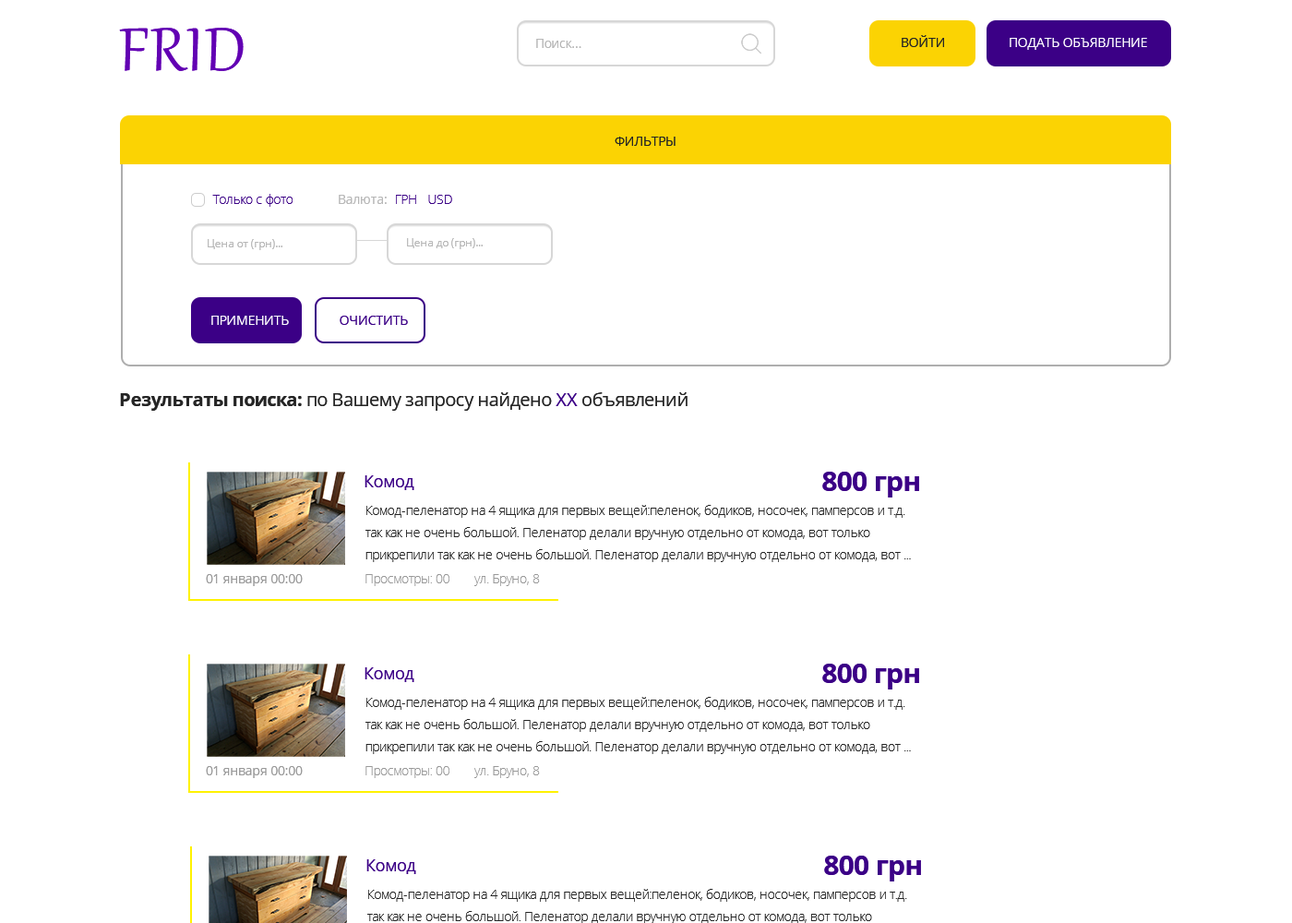
<style>
.page{position:relative;width:1292px;height:923px;background:#ffffff}
.page>*{position:absolute;margin:0}
.t1{font:75px "Gabriola";letter-spacing:0.025em;color:#6200b3}
.t2{font:12.9px "OpenSans";letter-spacing:-0.024em;color:#b7b7b7}
.t3{font:12.9px "OpenSans";letter-spacing:-0.024em;color:#252525}
.t4{font:12.9px "OpenSans";letter-spacing:-0.024em;color:#ffffff}
.t5{font:12.9px "OpenSans-Light";letter-spacing:-0.024em;color:#3b0086}
.t6{font:11.1px "OpenSans";letter-spacing:-0.024em;color:#b7b7b7}
.t7{font:12.9px "OpenSans";letter-spacing:-0.024em;color:#3b0086}
.t8{font:18.5px "OpenSans";letter-spacing:-0.024em;color:#252525}
.t9{font:18.5px "OpenSans-Bold";letter-spacing:-0.024em;color:#252525}
.t10{font:18.5px "OpenSans";letter-spacing:-0.024em;color:#3b0086}
.t11{font:27.7px "OpenSans-Bold";letter-spacing:-0.024em;color:#3b0086}
.t12{font:16.6px "OpenSans";letter-spacing:-0.024em;color:#3b0086}
.t13{font:12.9px/22.1px "OpenSans-Light";letter-spacing:-0.024em;color:#252525}
.t14{font:12.9px "OpenSans";letter-spacing:-0.024em;color:#999999}
.t15{font:12.9px "OpenSans-Light";letter-spacing:-0.024em;color:#999999}
</style>
<div class="page">
<p class="t1" style="left:119px;top:28px;width:125px;height:43px">FRID</p>
<p class="t2" style="left:536px;top:39px;width:45px;height:9px">Поиск...</p>
<p class="t3" style="left:902px;top:35px;width:42px;height:12px">ВОЙТИ</p>
<p class="t4" style="left:1010px;top:38px;width:137px;height:12px">ПОДАТЬ ОБЪЯВЛЕНИЕ</p>
<p class="t3" style="left:615px;top:137px;width:61px;height:9px">ФИЛЬТРЫ</p>
<p class="t5" style="left:212px;top:194px;width:81px;height:13px">Только с фото</p>
<p class="t2" style="left:339px;top:195px;width:48px;height:9px">Валюта:</p>
<p class="t5" style="left:396px;top:195px;width:56px;height:9px">ГРН USD</p>
<p class="t6" style="left:208px;top:239px;width:74px;height:11px">Цена от (грн)...</p>
<p class="t6" style="left:407px;top:238px;width:76px;height:11px">Цена до (грн)...</p>
<p class="t4" style="left:211px;top:316px;width:78px;height:9px">ПРИМЕНИТЬ</p>
<p class="t7" style="left:340px;top:316px;width:68px;height:9px">ОЧИСТИТЬ</p>
<p class="t8" style="left:120px;top:392px;width:568px;height:19px"><span class="t9">Результаты поиска:</span> по Вашему запросу найдено <span class="t10">ХХ </span>объявлений</p>
<p class="t11" style="left:822px;top:472px;width:97px;height:25px">800 грн</p>
<p class="t12" style="left:365px;top:475px;width:49px;height:15px">Комод</p>
<p class="t13" style="left:365px;top:505px;width:546px;height:57px">Комод-пеленатор на 4 ящика для первых вещей:пеленок, бодиков, носочек, памперсов и т.д.<br>так как не очень большой. Пеленатор делали вручную отдельно от комода, вот только<br>прикрепили так как не очень большой. Пеленатор делали вручную отдельно от комода, вот ...</p>
<p class="t14" style="left:206px;top:574px;width:97px;height:12px">01 января 00:00</p>
<p class="t15" style="left:365px;top:574px;width:84px;height:12px">Просмотры: 00</p>
<p class="t15" style="left:474px;top:574px;width:66px;height:12px">ул. Бруно, 8</p>
<p class="t11" style="left:822px;top:664px;width:97px;height:25px">800 грн</p>
<p class="t12" style="left:365px;top:667px;width:49px;height:15px">Комод</p>
<p class="t13" style="left:365px;top:697px;width:546px;height:57px">Комод-пеленатор на 4 ящика для первых вещей:пеленок, бодиков, носочек, памперсов и т.д.<br>так как не очень большой. Пеленатор делали вручную отдельно от комода, вот только<br>прикрепили так как не очень большой. Пеленатор делали вручную отдельно от комода, вот ...</p>
<p class="t14" style="left:206px;top:766px;width:97px;height:12px">01 января 00:00</p>
<p class="t15" style="left:365px;top:766px;width:84px;height:12px">Просмотры: 00</p>
<p class="t15" style="left:474px;top:766px;width:66px;height:12px">ул. Бруно, 8</p>
<p class="t11" style="left:824px;top:856px;width:97px;height:25px">800 грн</p>
<p class="t12" style="left:366px;top:859px;width:50px;height:15px">Комод</p>
</div>
